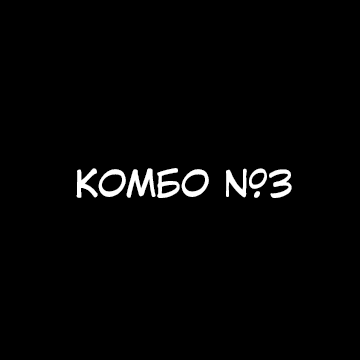
<style>
.page{position:relative;width:360px;height:360px;background:#000000}
.page>*{position:absolute;margin:0}
.t1{font:36px "KuraiVoice2";color:#ffffff;text-transform:uppercase}
</style>
<div class="page">
<p class="t1" style="left:76px;top:168px;width:216px;height:30px">комбо №3</p>
</div>
